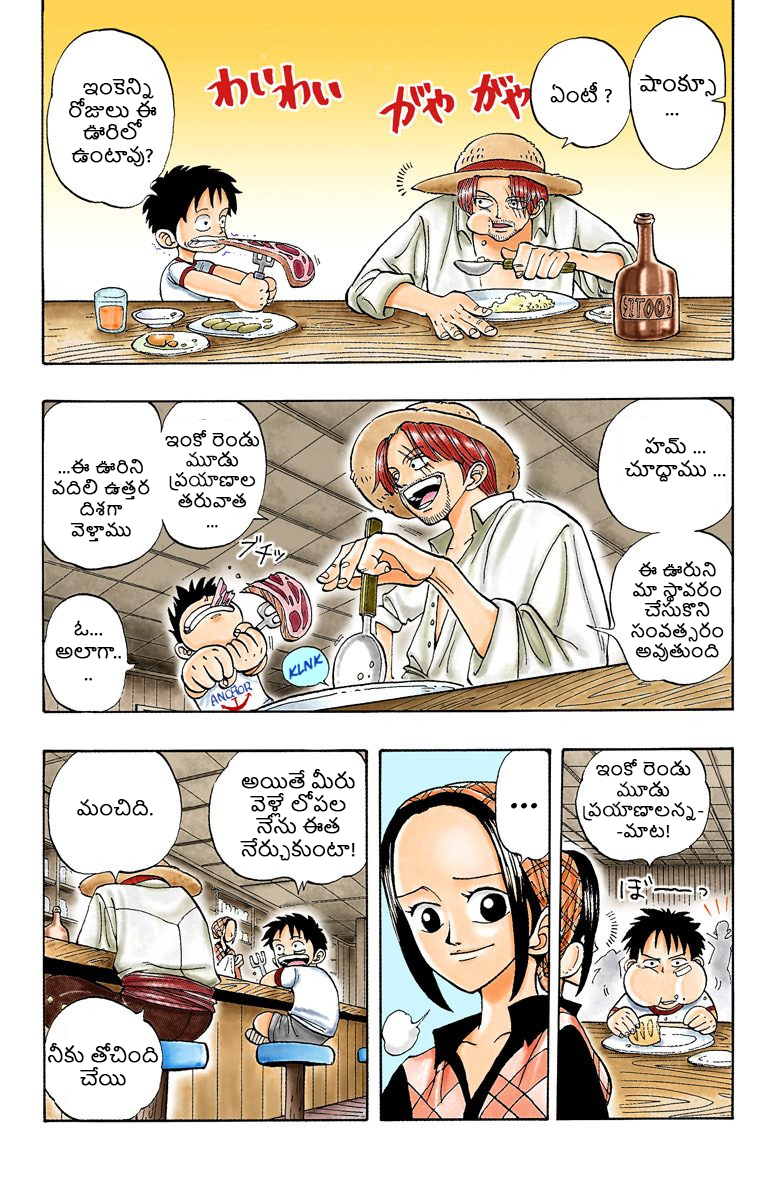
<style>
.page{position:relative;width:780px;height:1200px;background:#ffffff}
.page>*{position:absolute;margin:0}
.t1{font:18.8px "NirmalaUI";color:#000000;font-weight:bold}
.t2{font:19.7px "NirmalaUI";color:#000000;font-weight:bold}
.t3{font:17px "NirmalaUI";color:#000000;font-weight:bold}
.t4{font:17.4px "NirmalaUI";color:#000000;font-weight:bold}
.t5{font:17.2px "NirmalaUI";color:#000000;font-weight:bold}
</style>
<div class="page">
<p class="t1" style="left:69px;top:78px;width:88px;height:89px;text-align:center">ఇంకెన్ని రోజులు ఈ ఊరిలో ఉంటావు?</p>
<p class="t2" style="left:640px;top:74px;width:76px;height:42px;text-align:center">షాంక్సూ<br>...</p>
<p class="t1" style="left:550px;top:82px;width:62px;height:21px">ఏంటీ ?</p>
<p class="t3" style="left:165px;top:430px;width:95px;height:98px;text-align:center">ఇంకో రెండు మూడు ప్రయాణాల తరువాత<br>...</p>
<p class="t1" style="left:625px;top:437px;width:101px;height:45px;text-align:center">హమ్ ... చూద్దాము ...</p>
<p class="t4" style="left:52px;top:458px;width:98px;height:84px;text-align:center">...ఈ ఊరిని వదిలి ఉత్తర దిశగా వెళ్తాము</p>
<p class="t3" style="left:631px;top:561px;width:93px;height:101px;text-align:center">ఈ ఊరుని మా స్థావరం చేసుకొని సంవత్సరం అవుతుంది</p>
<p class="t1" style="left:55px;top:620px;width:66px;height:61px;text-align:center">ఓ... అలాగా....</p>
<p class="t5" style="left:583px;top:759px;width:121px;height:79px;text-align:center">ఇంకో రెండు మూడు ప్రయాణాలన్న--మాట!</p>
<p class="t1" style="left:240px;top:769px;width:115px;height:92px;text-align:center">అయితే మీరు వెళ్లే లోపల నేను ఈత నేర్చుకుంటా!</p>
<p class="t1" style="left:77px;top:799px;width:76px;height:17px">మంచిది.</p>
<p class="t1" style="left:48px;top:1043px;width:110px;height:43px;text-align:center">నీకు తోచింది చేయి</p>
</div>
